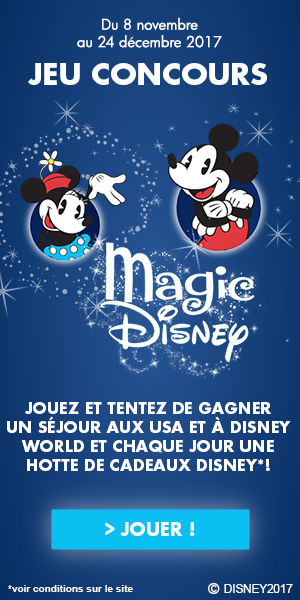
<style>
.page{position:relative;width:300px;height:600px}
.page>*{position:absolute;margin:0}
.t1{font:14.5px "Futura-Book";color:#ffffff}
.t2{font:29.1px "FuturaStd-Bold";color:#ffffff;text-transform:uppercase}
.t3{font:15.8px/19px "FuturaStd-Bold";color:#ffffff;text-transform:uppercase}
.t4{font:23.7px "FuturaStd-Medium";color:#f9fef8;text-transform:uppercase;scale:0.66 1}
.t5{font:18.2px "FuturaStd-Bold";color:#f9fef8;text-transform:uppercase}
.t6{font:10px "Arial-BoldMT";color:#f9fef8}
.t7{font:14.7px "FuturaStd-Bold";color:#ffffff;text-transform:uppercase}
.t8{font:11.7px "ArialMT";color:#ffffff;text-transform:uppercase}
</style>
<div class="page">
<p class="t1" style="left:77px;top:17px;width:145px;height:31px;text-align:center">Du 8 novembre<br>au 24 décembre 2017</p>
<p class="t2" style="left:28px;top:63px;width:239px;height:22px">JEU CONCOURS</p>
<p class="t3" style="left:7px;top:402px;width:284px;height:69px;text-align:center">JOUEZ ET TENTEZ DE GAGNER<br>UN SÉJOUR AUX USA ET À DISNEY<br>WORLD ET CHAQUE JOUR UNE<br>HOTTE DE CADEAUX DISNEY*!</p>
<p class="t4" style="left:105px;top:523px;width:9px;height:12px">&gt;</p>
<p class="t5" style="left:120px;top:522px;width:75px;height:14px">JOUER !</p>
<p class="t6" style="left:8px;top:585px;width:125px;height:7px">*voir conditions sur le site</p>
<p class="t7" style="left:208px;top:583px;width:12px;height:11px">©</p>
<p class="t8" style="left:224px;top:584px;width:69px;height:9px">Disney2017</p>
</div>
